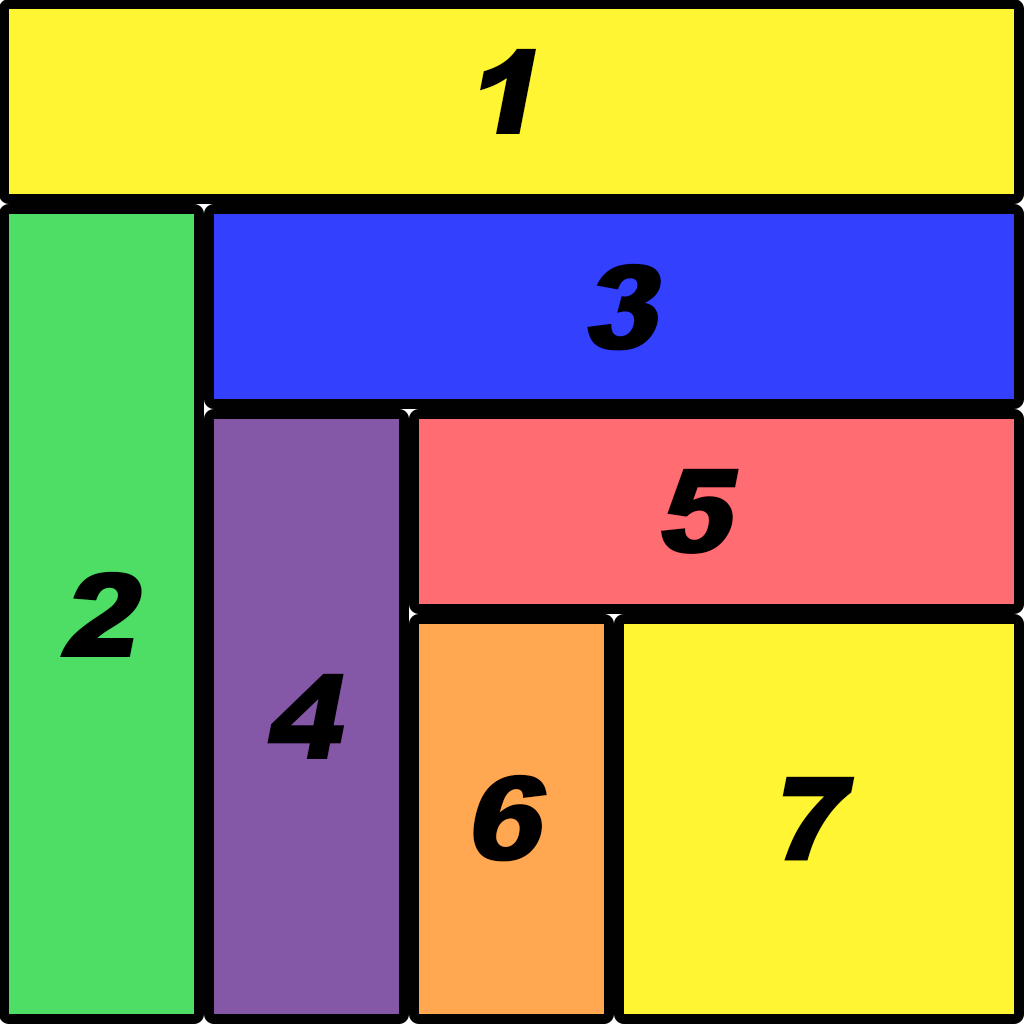
<style>
.page{position:relative;width:1024px;height:1024px;background:#fff533}
.page>*{position:absolute;margin:0}
.t1{font:117.3px "Arial-Black";color:#000000;font-style:italic}
</style>
<div class="page">
<p class="t1" style="left:480px;top:48px;width:57px;height:86px">1</p>
<p class="t1" style="left:587px;top:263px;width:74px;height:88px">3</p>
<p class="t1" style="left:661px;top:468px;width:78px;height:86px">5</p>
<p class="t1" style="left:60px;top:571px;width:82px;height:86px">2</p>
<p class="t1" style="left:267px;top:673px;width:78px;height:86px">4</p>
<p class="t1" style="left:473px;top:774px;width:74px;height:88px">6</p>
<p class="t1" style="left:782px;top:776px;width:73px;height:85px">7</p>
</div>
